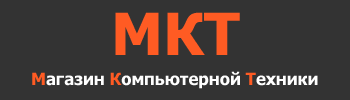
<style>
.page{position:relative;width:350px;height:100px;background:#333333}
.page>*{position:absolute;margin:0}
.t1{font:58.3px "Tahoma-Bold";color:#ff5b23}
.t2{font:16.7px "Tahoma-Bold";color:#ffffff}
.t3{font:16.7px "Tahoma-Bold";color:#ff5b23}
</style>
<div class="page">
<p class="t1" style="left:115px;top:12px;width:125px;height:43px">МКТ</p>
<p class="t2" style="left:32px;top:71px;width:286px;height:18px"><span class="t3">М</span>агазин<span class="t3"> К</span>омпьютерной<span class="t3"> Т</span>ехники</p>
</div>
